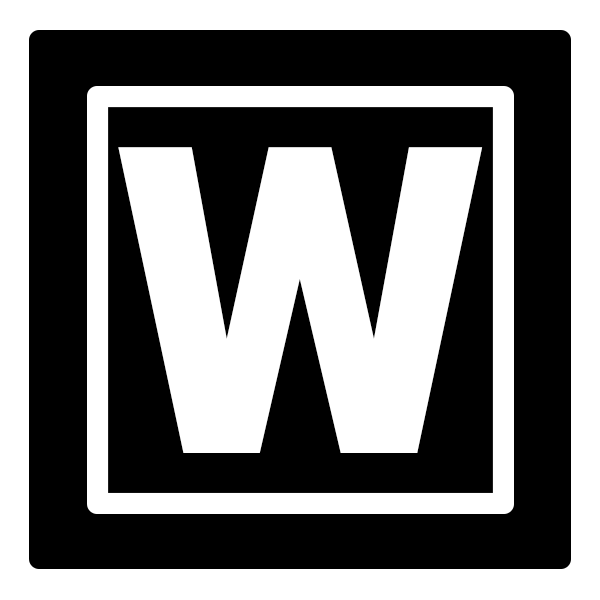
<style>
.page{position:relative;width:600px;height:600px;background:#000000}
.page>*{position:absolute;margin:0}
.t1{font:430px "Roboto-Black";color:#ffffff}
</style>
<div class="page">
<p class="t1" style="left:118px;top:147px;width:365px;height:306px">W</p>
</div>
